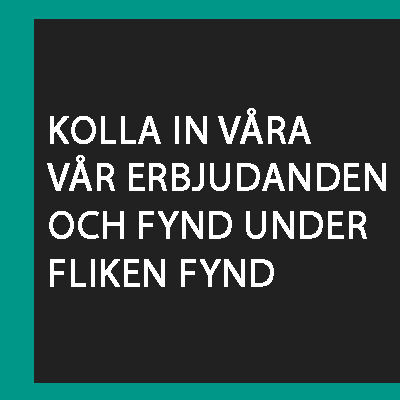
<style>
.page{position:relative;width:400px;height:400px;background:#212121}
.page>*{position:absolute;margin:0}
.t1{font:39.9px "MyriadPro-Regular";color:#ffffff;font-weight:bold}
</style>
<div class="page">
<p class="t1" style="left:47px;top:108px;width:339px;height:179px">KOLLA IN VÅRA<br>VÅR ERBJUDANDEN<br>OCH FYND UNDER<br>FLIKEN FYND</p>
</div>
